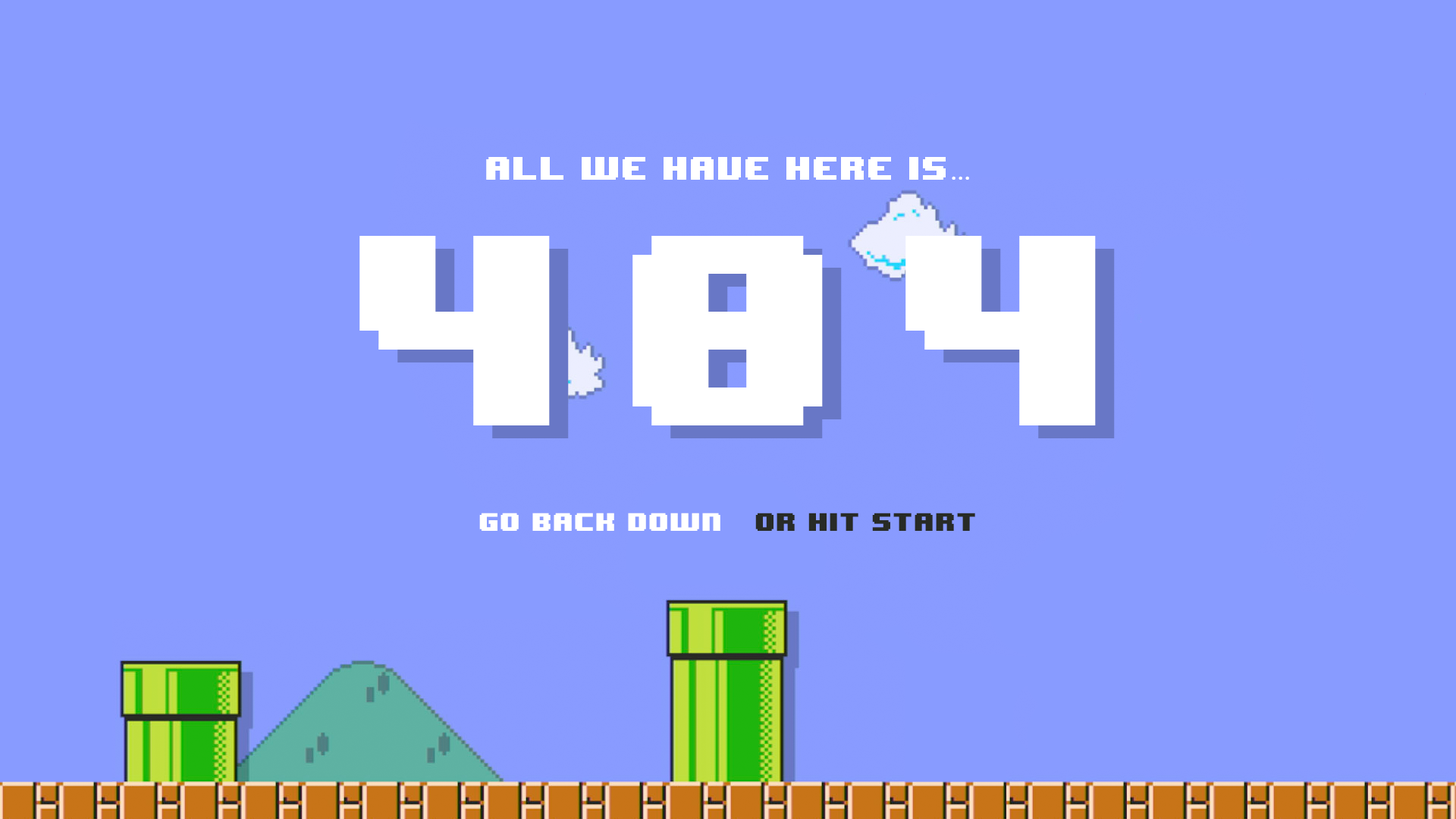
<style>
.page{position:relative;width:1456px;height:819px;background:#889bff}
.page>*{position:absolute;margin:0}
.t1{font:27.3px "8BITWONDERNominal";color:#ffffff}
.t2{font:27.3px "VarelaRound-Regular";color:#ffffff}
.t3{font:227.5px "8BITWONDERNominal";letter-spacing:0.2em;color:#ffffff}
.t4{font:21.2px "8BITWONDERNominal";color:#ffffff}
.t5{font:21.2px "8BITWONDERNominal";color:#282b26}
</style>
<div class="page">
<p class="t1" style="left:486px;top:157px;width:483px;height:23px">All we have here is<span class="t2">...</span></p>
<p class="t3" style="left:359px;top:236px;width:737px;height:189px">404</p>
<p class="t4" style="left:479px;top:513px;width:241px;height:18px">Go back down</p>
<p class="t5" style="left:755px;top:513px;width:220px;height:18px">Or Hit Start</p>
</div>
